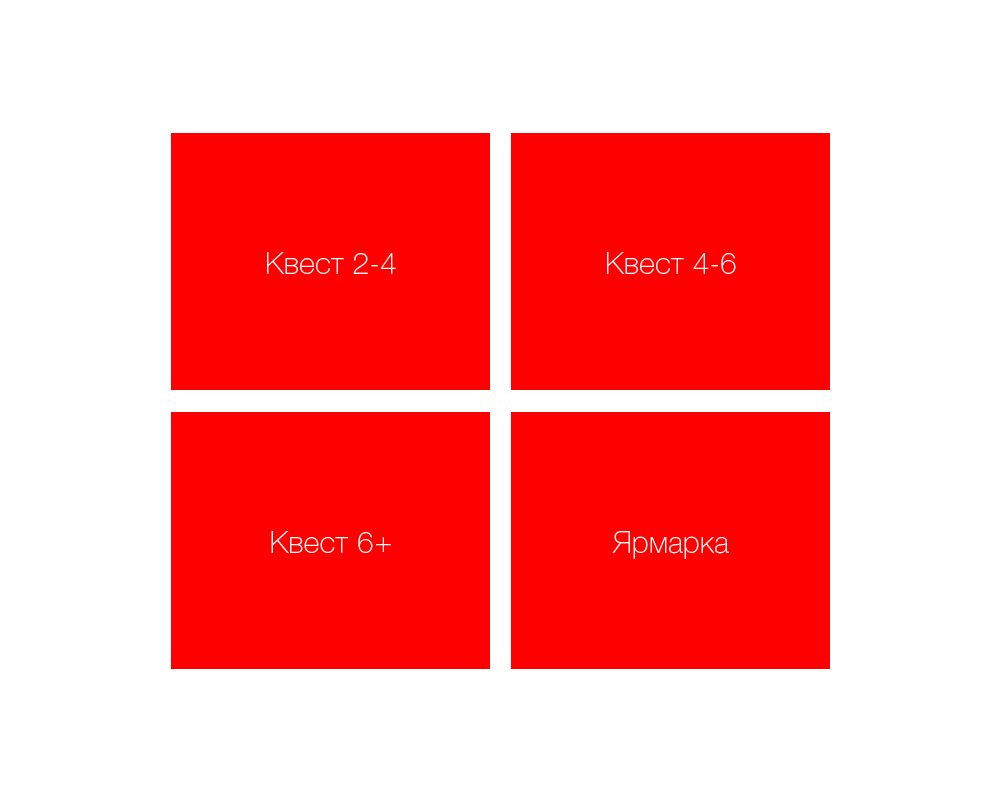
<style>
.page{position:relative;width:1000px;height:800px;background:#ffffff}
.page>*{position:absolute;margin:0}
.t1{font:30px "HelveticaNeueCyr-Thin";letter-spacing:0.005em;color:#ffffff}
</style>
<div class="page">
<p class="t1" style="left:267px;top:252px;width:129px;height:22px">Квест 2-4</p>
<p class="t1" style="left:607px;top:252px;width:129px;height:22px">Квест 4-6</p>
<p class="t1" style="left:271px;top:531px;width:120px;height:22px">Квест 6+</p>
<p class="t1" style="left:612px;top:531px;width:117px;height:28px">Ярмарка</p>
</div>
